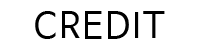
<style>
.page{position:relative;width:200px;height:50px;background:#ffffff}
.page>*{position:absolute;margin:0}
.t1{font:35.4px "NanumBarunGothic";letter-spacing:0.05em;color:#000000}
</style>
<div class="page">
<p class="t1" style="left:35px;top:11px;width:130px;height:28px">CREDIT</p>
</div>
